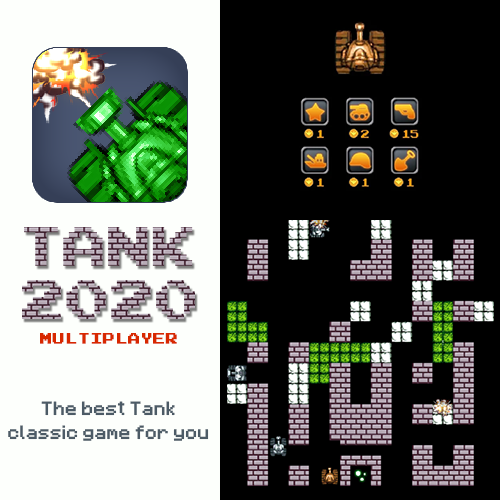
<style>
.page{position:relative;width:500px;height:500px;background:#000000}
.page>*{position:absolute;margin:0}
.t1{font:12px "PressStart2P";letter-spacing:0.02em;color:#d82800;font-weight:bold}
.t2{font:15px/24px "Minecraftia-Regular";letter-spacing:0.02em;color:#4c5b66;font-weight:bold}
</style>
<div class="page">
<p class="t1" style="left:40px;top:333px;width:137px;height:11px">MULTIPLAYER</p>
<p class="t2" style="left:8px;top:401px;width:201px;height:40px;text-align:center">The best Tank<br>classic game for you</p>
</div>
